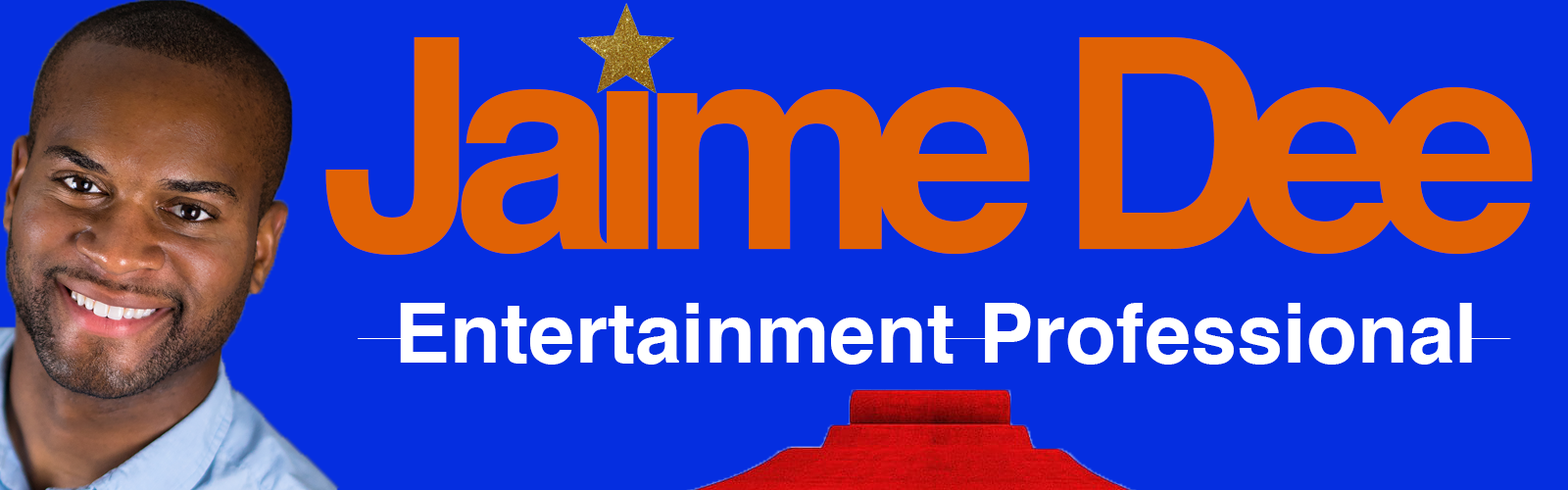
<style>
.page{position:relative;width:1568px;height:490px;background:#052ee0}
.page>*{position:absolute;margin:0}
.t1{font:294px "Helvetica-Bold";letter-spacing:-0.1em;color:#e06205}
.t2{font:83.3px "Helvetica-Bold";color:#ffffff}
</style>
<div class="page">
<p class="t1" style="left:325px;top:37px;width:1208px;height:218px">Jaime Dee</p>
<p class="t2" style="left:400px;top:303px;width:1072px;height:62px">Entertainment Professional</p>
</div>
